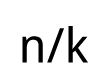
<style>
.page{position:relative;width:105px;height:83px;background:#ffffff}
.page>*{position:absolute;margin:0}
.t1{font:47.9px "DroidSans";color:#000000}
</style>
<div class="page">
<p class="t1" style="left:22px;top:26px;width:66px;height:37px">n/k</p>
</div>
